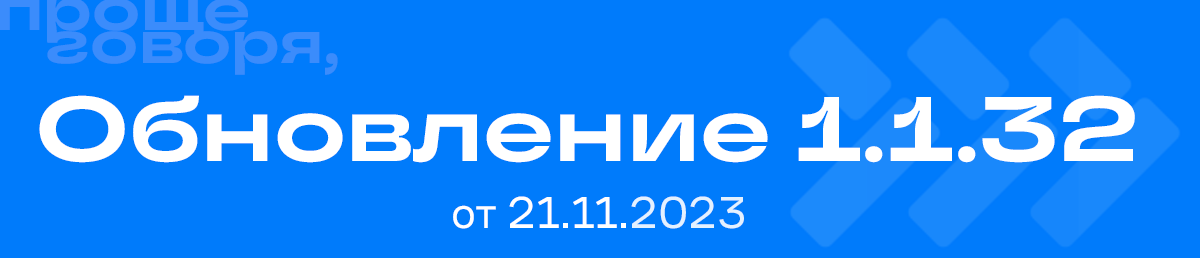
<style>
.page{position:relative;width:1200px;height:258px;background:#007bfb}
.page>*{position:absolute;margin:0}
.t1{font:61px/33px "TTTravelsNext-Bd";color:#3b8cfb}
.t2{font:91.5px "TTTravelsNext-Bd";color:#ffffff}
.t3{font:45.8px "CoFoSans-Regular"}
</style>
<div class="page">
<p class="t1" style="left:0px;top:0px;width:338px;height:75px">проще<br>   говоря,</p>
<p class="t2" style="left:39px;top:95px;width:1096px;height:68px">Обновление 1.1.32</p>
<p class="t3" style="left:453px;top:196px;width:291px;height:33px">от 21.11.2023</p>
</div>
